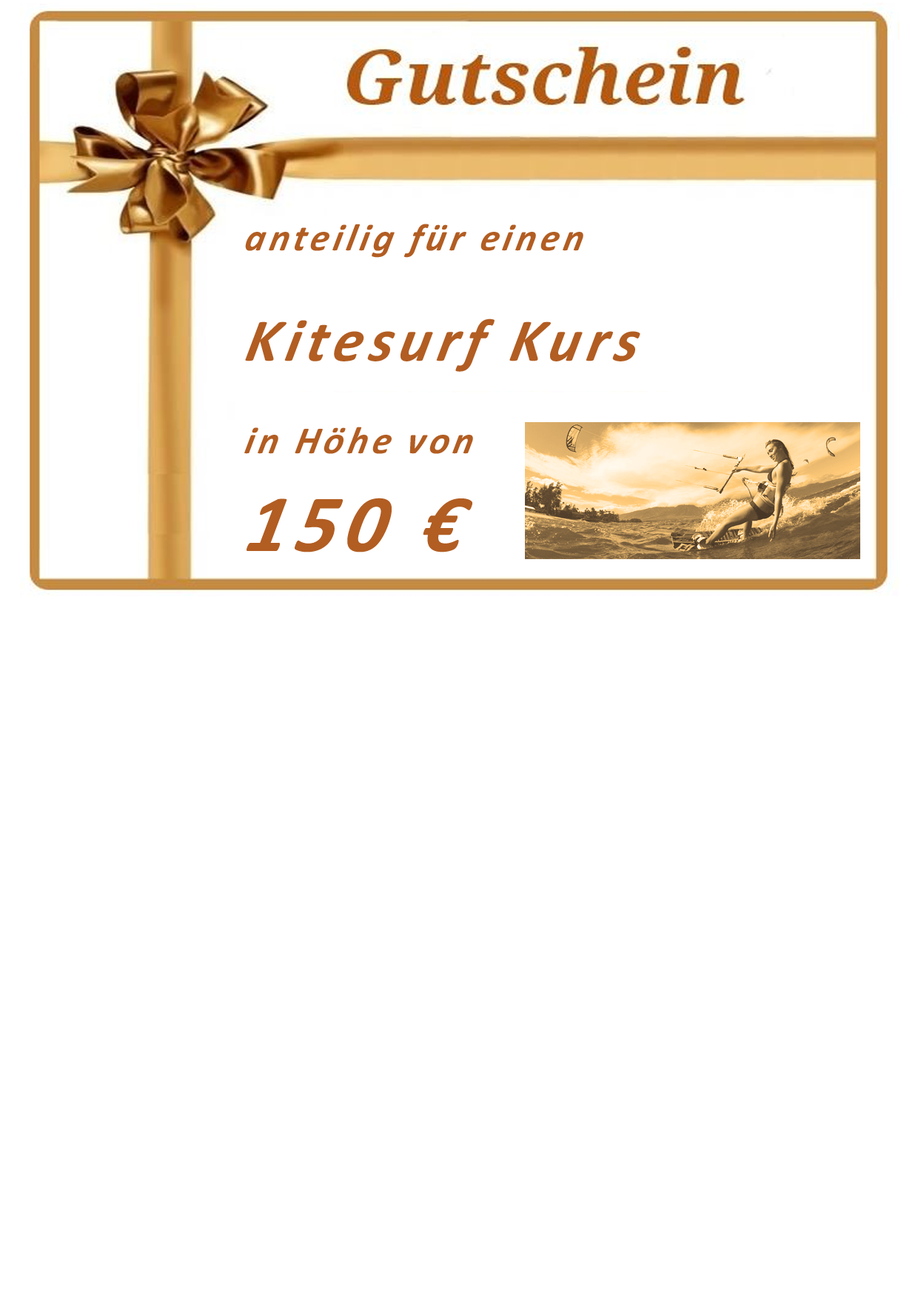
<style>
.page{position:relative;width:918px;height:1299px;background:#ffffff}
.page>*{position:absolute;margin:0}
.t1{font:38.6px "Calibri-BoldItalic";letter-spacing:0.1em;color:#b25d22;font-style:italic}
.t2{font:30.9px "Calibri-BoldItalic";letter-spacing:0.1em;color:#b25d22;font-style:italic}
.t3{font:60.8px "Calibri-BoldItalic";letter-spacing:0.1em;color:#b25d22;font-style:italic}
.t4{font:81.8px "Calibri-BoldItalic";letter-spacing:0.1em;color:#b25d22;font-style:italic}
.t5{font:39.2px "Calibri-BoldItalic";letter-spacing:0.1em;color:#b25d22;font-style:italic}
</style>
<div class="page">
<p class="t1" style="left:244px;top:224px;width:396px;height:328px">anteilig für einen<br><span class="t2"><br></span><span class="t3">Kitesurf Kurs<br></span><br>in Höhe von<br><span class="t4">150 €<br></span><span class="t5"></span></p>
</div>
